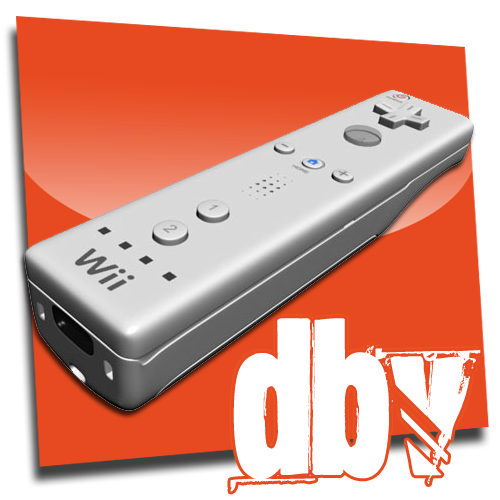
<style>
.page{position:relative;width:500px;height:500px;background:#ffffff}
.page>*{position:absolute;margin:0}
.t1{font:150px "OLYMPIQUES";color:#ffffff}
</style>
<div class="page">
<p class="t1" style="left:230px;top:318px;width:251px;height:174px">dbv</p>
</div>
